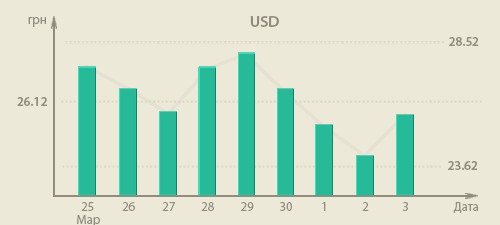
<style>
.page{position:relative;width:500px;height:225px;background:#ede9d9}
.page>*{position:absolute;margin:0}
.t1{font:12.7px "MyriadPro-Regular";color:#928c7f}
.t2{font:16px "MyriadPro-Semibold";color:#928c7f}
.t3{font:12.7px "MyriadPro-Semibold";color:#928c7f}
</style>
<div class="page">
<p class="t1" style="left:28px;top:17px;width:18px;height:10px">грн</p>
<p class="t2" style="left:250px;top:16px;width:29px;height:11px">USD</p>
<p class="t3" style="left:449px;top:37px;width:30px;height:9px">28.52</p>
<p class="t3" style="left:17px;top:97px;width:30px;height:9px">26.12</p>
<p class="t3" style="left:448px;top:161px;width:30px;height:9px">23.62</p>
<p class="t1" style="left:81px;top:202px;width:13px;height:9px">25</p>
<p class="t1" style="left:122px;top:202px;width:13px;height:9px">26</p>
<p class="t1" style="left:162px;top:202px;width:13px;height:9px">27</p>
<p class="t1" style="left:201px;top:202px;width:13px;height:9px">28</p>
<p class="t1" style="left:241px;top:202px;width:13px;height:9px">29</p>
<p class="t1" style="left:280px;top:202px;width:12px;height:9px">30</p>
<p class="t1" style="left:322px;top:202px;width:4px;height:9px">1</p>
<p class="t1" style="left:362px;top:202px;width:7px;height:9px">2</p>
<p class="t1" style="left:402px;top:202px;width:6px;height:9px">3</p>
<p class="t1" style="left:453px;top:202px;width:25px;height:11px">Дата</p>
<p class="t1" style="left:77px;top:215px;width:23px;height:12px">Мар</p>
</div>
